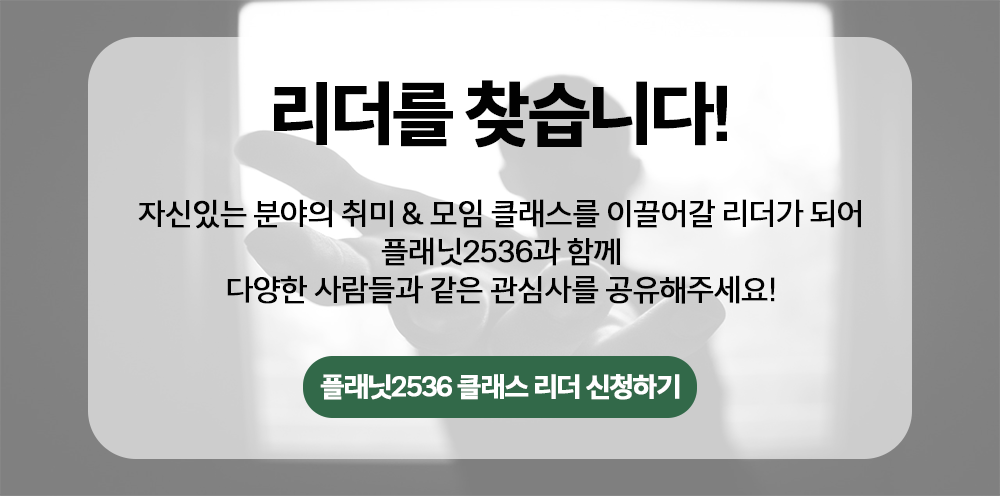
<style>
.page{position:relative;width:1000px;height:496px}
.page>*{position:absolute;margin:0}
.t1{font:70px "Happiness-Sans-Bold";letter-spacing:-0.07em;color:#010101;font-weight:bold}
.t2{font:30px/38px "Happiness-Sans-Regular";letter-spacing:-0.04em;color:#010101;font-weight:bold}
.t3{font:27px "Happiness-Sans-Bold";letter-spacing:-0.07em;color:#ffffff;font-weight:bold}
</style>
<div class="page">
<p class="t1" style="left:274px;top:80px;width:453px;height:68px">리더를 찾습니다!</p>
<p class="t2" style="left:138px;top:199px;width:723px;height:105px;text-align:center">자신있는 분야의 취미 &amp; 모임 클래스를 이끌어갈 리더가 되어<br>플래닛2536과 함께<br>다양한 사람들과 같은 관심사를 공유해주세요!</p>
<p class="t3" style="left:320px;top:374px;width:360px;height:26px">플래닛2536 클래스 리더 신청하기</p>
</div>
